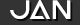
<style>
.page{position:relative;width:80px;height:25px;background:#333333}
.page>*{position:absolute;margin:0}
.t1{font:30px "EarthOrbiterExtra-Bold";color:#ffffff}
</style>
<div class="page">
<p class="t1" style="left:10px;top:0px;width:61px;height:19px">JAN</p>
</div>
